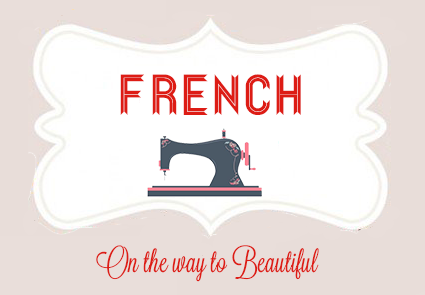
<style>
.page{position:relative;width:425px;height:295px;background:#ffffff}
.page>*{position:absolute;margin:0}
.t1{font:52px "Ribbon";color:#dd1c15}
.t2{font:30px "Lavanderia-Regular";color:#dd1c15}
</style>
<div class="page">
<p class="t1" style="left:120px;top:74px;width:181px;height:42px">FRENCH</p>
<p class="t2" style="left:96px;top:245px;width:223px;height:37px">On the way to Beautiful</p>
</div>
